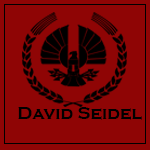
<style>
.page{position:relative;width:150px;height:150px;background:#8f0505}
.page>*{position:absolute;margin:0}
.t1{font:18px "CopperplateGothic-Bold";color:#000000}
</style>
<div class="page">
<p class="t1" style="left:18px;top:107px;width:124px;height:13px">David Seidel</p>
</div>
